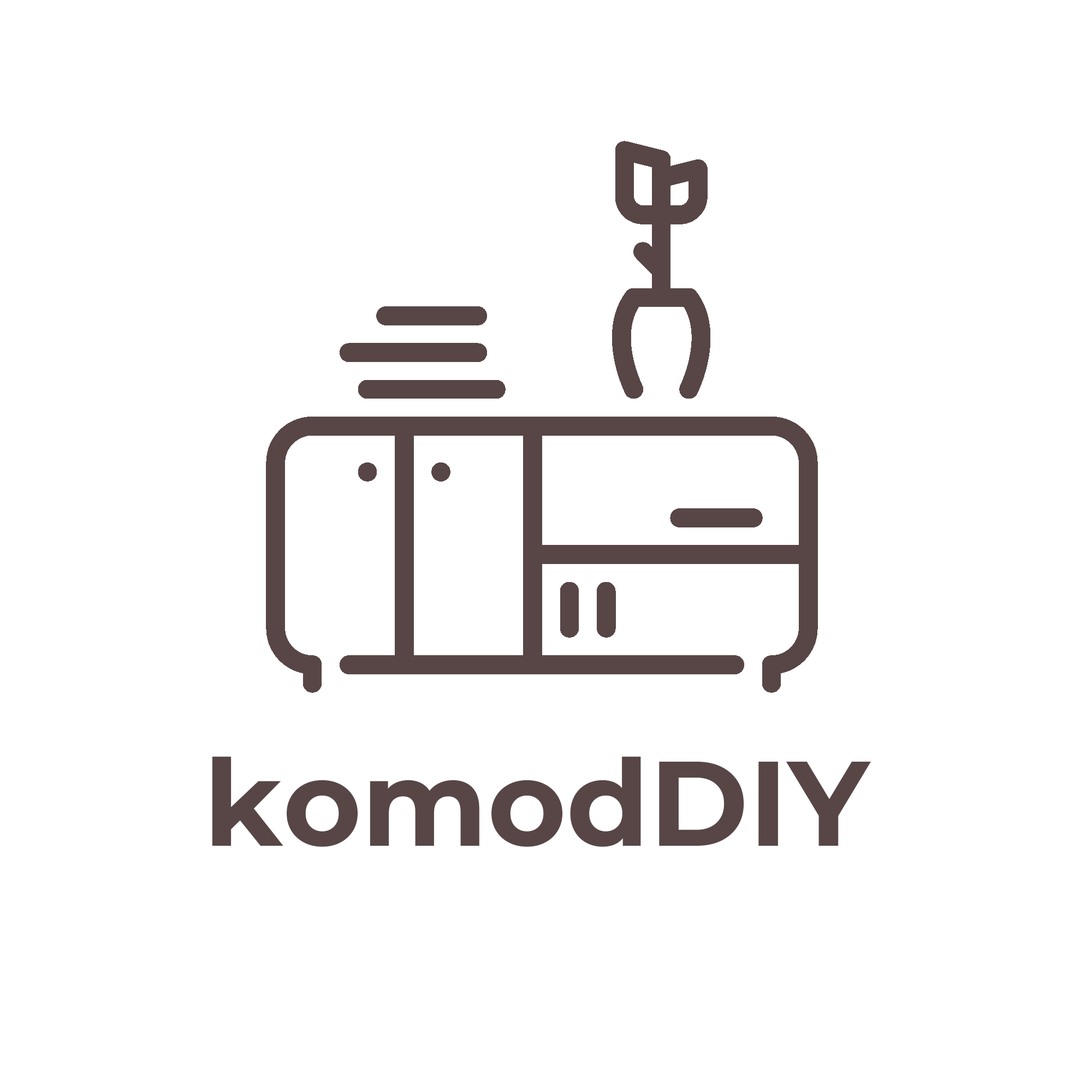
<style>
.page{position:relative;width:1092px;height:1092px;background:#ffffff}
.page>*{position:absolute;margin:0}
.t1{font:120.1px "Montserrat-Bold";color:#584646}
</style>
<div class="page">
<p class="t1" style="left:212px;top:756px;width:659px;height:91px">komodDIY</p>
</div>
